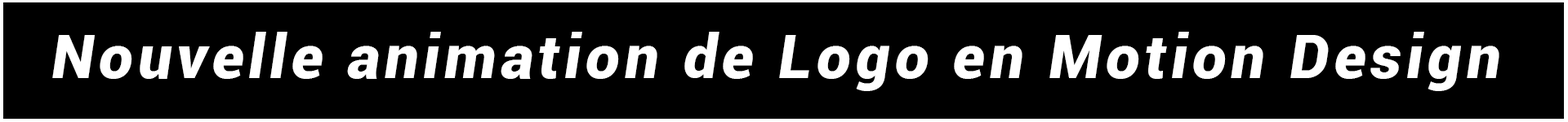
<style>
.page{position:relative;width:1568px;height:122px;background:#000000}
.page>*{position:absolute;margin:0}
.t1{font:60.4px "Roboto-BlackItalic";letter-spacing:0.08em;color:#ffffff}
</style>
<div class="page">
<p class="t1" style="left:52px;top:32px;width:1447px;height:59px">Nouvelle animation de Logo en Motion Design</p>
</div>
